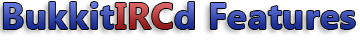
<style>
.page{position:relative;width:360px;height:40px;background:#ffffff}
.page>*{position:absolute;margin:0}
.t1{font:36px "Gadugi-Bold";letter-spacing:0.02em}
</style>
<div class="page">
<p class="t1" style="left:3px;top:2px;width:352px;height:27px">BukkitIRCd Features</p>
</div>
